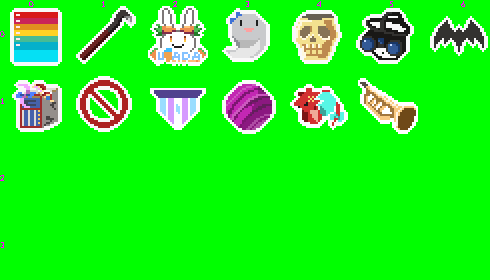
<style>
.page{position:relative;width:490px;height:280px;background:#00ff00}
.page>*{position:absolute;margin:0}
.t1{font:8px "Lato-Regular";color:#ff00ff}
</style>
<div class="page">
<p class="t1" style="left:29px;top:1px;width:437px;height:7px">0  1  2  3  4  5  6</p>
</div>
